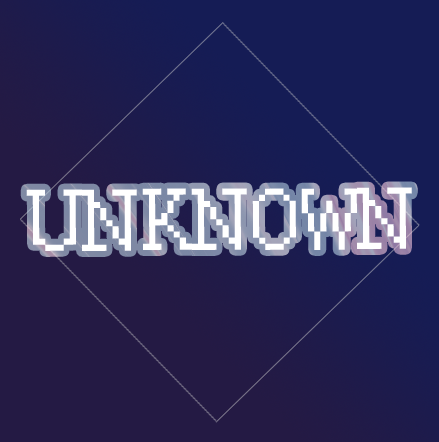
<style>
.page{position:relative;width:439px;height:442px;background:#241a44}
.page>*{position:absolute;margin:0}
.t1{font:98px "Courier";color:#ffffff}
</style>
<div class="page">
<p class="t1" style="left:26px;top:187px;width:386px;height:64px">UNKNOWN</p>
</div>
